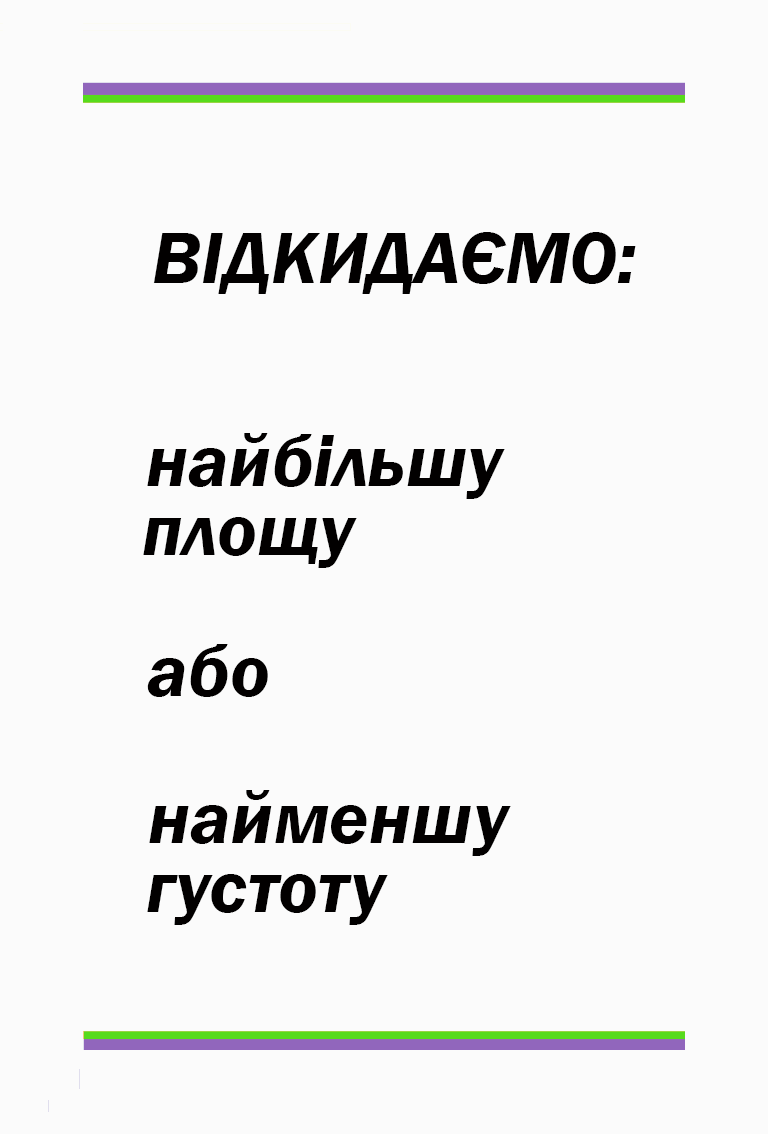
<style>
.page{position:relative;width:768px;height:1134px;background:#fbfbfb}
.page>*{position:absolute;margin:0}
.t1{font:75px "FranklinGothic-DemiItalic";color:#020000}
</style>
<div class="page">
<p class="t1" style="left:153px;top:232px;width:483px;height:62px">ВІДКИДАЄМО:</p>
<p class="t1" style="left:147px;top:433px;width:358px;height:66px">найбільшу</p>
<p class="t1" style="left:143px;top:517px;width:214px;height:51px">площу</p>
<p class="t1" style="left:147px;top:644px;width:121px;height:53px">або</p>
<p class="t1" style="left:149px;top:790px;width:362px;height:66px">найменшу</p>
<p class="t1" style="left:147px;top:874px;width:241px;height:51px">густоту</p>
</div>
